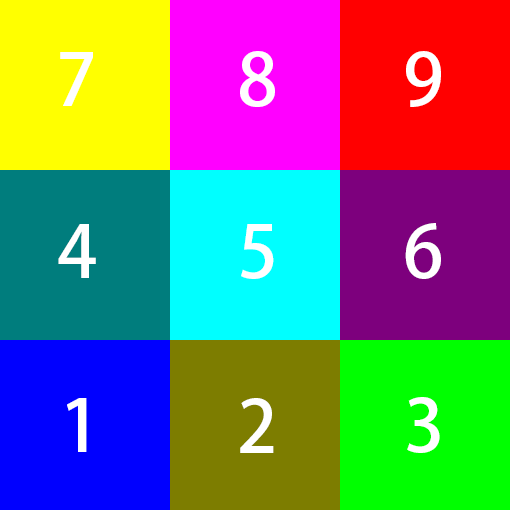
<style>
.page{position:relative;width:510px;height:510px}
.page>*{position:absolute;margin:0}
.t1{font:72px "AdobeHeitiStd-Regular";color:#ffffff}
</style>
<div class="page">
<p class="t1" style="left:60px;top:52px;width:33px;height:54px">7</p>
<p class="t1" style="left:240px;top:51px;width:35px;height:56px">8</p>
<p class="t1" style="left:406px;top:51px;width:35px;height:56px">9</p>
<p class="t1" style="left:58px;top:224px;width:38px;height:54px">4</p>
<p class="t1" style="left:241px;top:224px;width:33px;height:55px">5</p>
<p class="t1" style="left:405px;top:223px;width:36px;height:56px">6</p>
<p class="t1" style="left:67px;top:398px;width:20px;height:54px">1</p>
<p class="t1" style="left:240px;top:398px;width:34px;height:55px">2</p>
<p class="t1" style="left:407px;top:397px;width:33px;height:56px">3</p>
</div>
